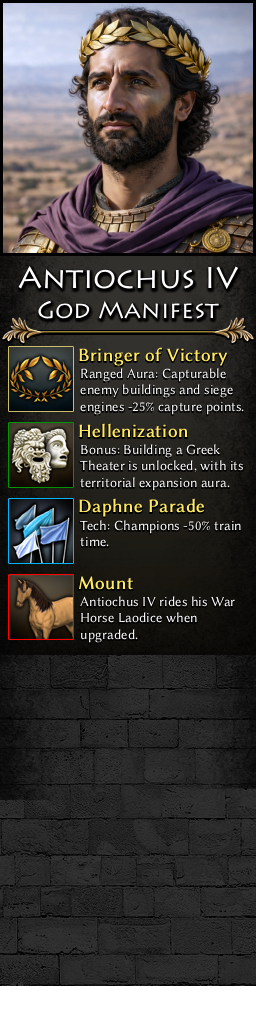
<style>
.page{position:relative;width:256px;height:1024px}
.page>*{position:absolute;margin:0}
.t1{font:30px/30px "Lithos";color:#ffffff}
.t2{font:24px/30px "Lithos";color:#ffffff}
.t3{font:19px "LinBiolinumO";color:#ffe963;font-weight:bold}
.t4{font:14px "LinBiolinumO";color:#ffffff}
</style>
<div class="page">
<p class="t1" style="left:18px;top:265px;width:221px;height:54px;text-align:center">Antiochus IV<br><span class="t2">God Manifest</span></p>
<p class="t3" style="left:79px;top:347px;width:149px;height:19px">Bringer of Victory</p>
<p class="t4" style="left:80px;top:368px;width:164px;height:47px">Ranged Aura: Capturable <br>enemy buildings and siege <br>engines -25% capture points.</p>
<p class="t3" style="left:79px;top:423px;width:109px;height:15px">Hellenization</p>
<p class="t4" style="left:80px;top:444px;width:163px;height:47px">Bonus: Building a Greek <br>Theater is unlocked, with its<br>territorial expansion aura.</p>
<p class="t3" style="left:79px;top:498px;width:126px;height:19px">Daphne Parade</p>
<p class="t4" style="left:80px;top:520px;width:161px;height:27px">Tech: Champions -50% train<br>time.</p>
<p class="t3" style="left:78px;top:576px;width:55px;height:14px">Mount</p>
<p class="t4" style="left:80px;top:596px;width:155px;height:47px">Antiochus IV rides his War <br>Horse Laodice when <br>upgraded.</p>
</div>
